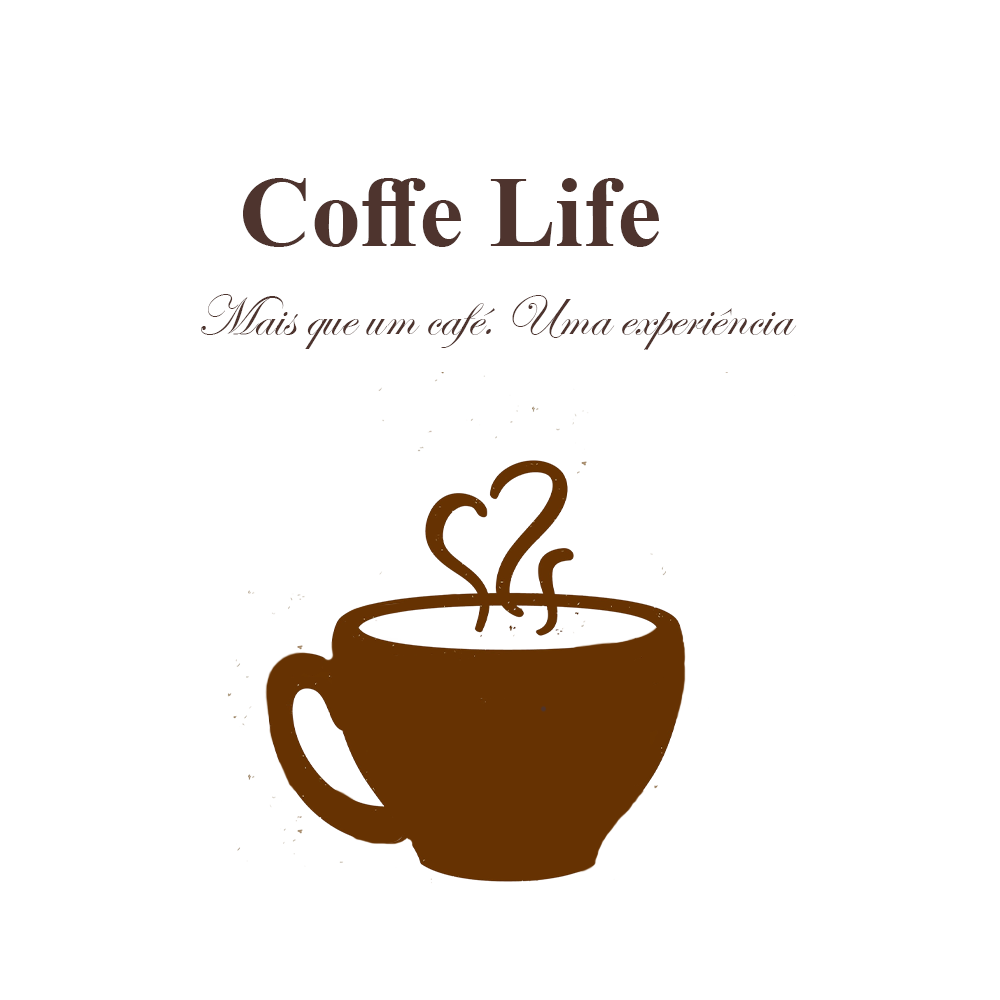
<style>
.page{position:relative;width:1000px;height:1000px;background:#ffffff}
.page>*{position:absolute;margin:0}
.t1{font:100px "TimesNewRomanPS-BoldMT";color:#4e342e}
.t2{font:58.3px "EdwardianScriptITC";color:#4e342e}
</style>
<div class="page">
<p class="t1" style="left:243px;top:178px;width:416px;height:69px">Coffe Life</p>
<p class="t2" style="left:201px;top:294px;width:596px;height:56px">Mais que um café. Uma experiência</p>
</div>
